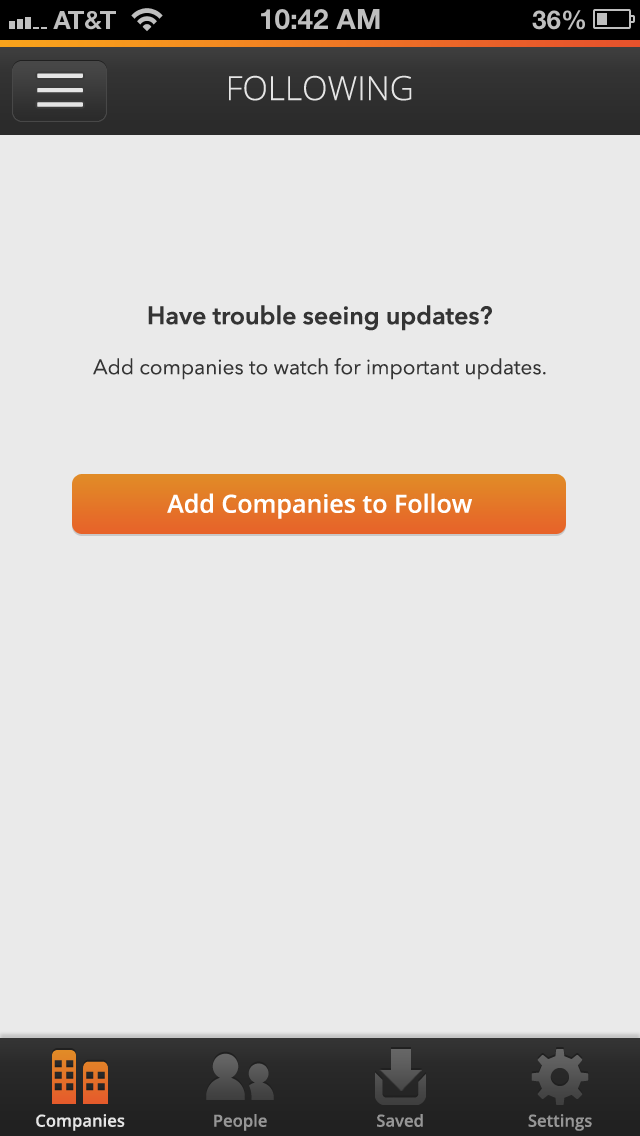
<style>
.page{position:relative;width:640px;height:1136px;background:#eaeaea}
.page>*{position:absolute;margin:0}
.t1{font:33.3px "OpenSans-Light";color:#e5e5e5}
.t2{font:20.8px "AvenirNext-Regular";color:#343434}
.t3{font:25px "AvenirNext-DemiBold";color:#343434}
.t4{font:25px "OpenSans-Semibold";color:#ffffff}
.t5{font:16.7px "OpenSans-Semibold";color:#e5e5e5}
.t6{font:16.7px "OpenSans-Semibold";color:#969696}
</style>
<div class="page">
<p class="t1" style="left:229px;top:75px;width:183px;height:26px">FOLLOWING</p>
<p class="t2" style="left:93px;top:305px;width:453px;height:75px;text-align:center"><span class="t3">Have trouble seeing updates?<br><br></span>Add companies to watch for important updates.</p>
<p class="t4" style="left:167px;top:493px;width:305px;height:26px">Add Companies to Follow</p>
<p class="t5" style="left:36px;top:1114px;width:89px;height:17px">Companies</p>
<p class="t6" style="left:214px;top:1114px;width:53px;height:17px">People</p>
<p class="t6" style="left:377px;top:1114px;width:46px;height:13px">Saved</p>
<p class="t6" style="left:528px;top:1114px;width:64px;height:17px">Settings</p>
</div>
